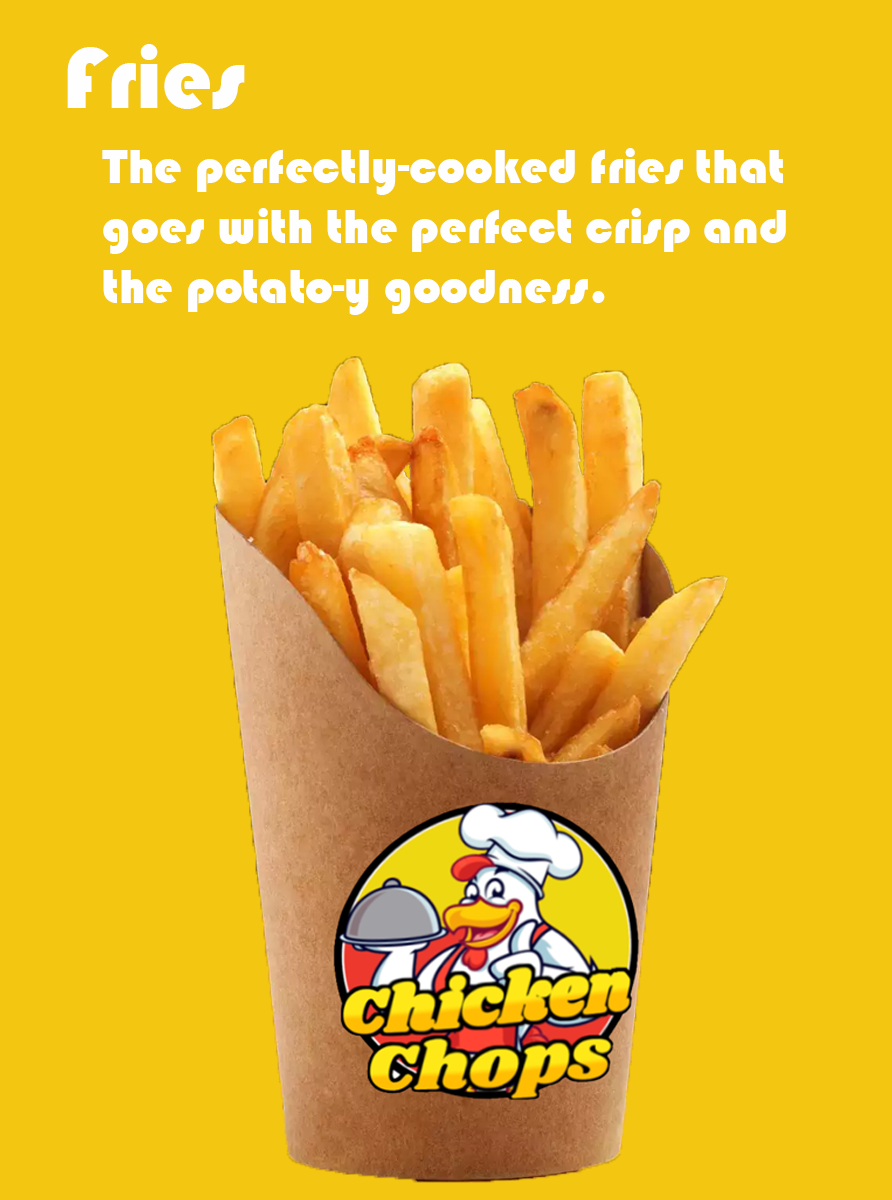
<style>
.page{position:relative;width:892px;height:1200px;background:#f3c611}
.page>*{position:absolute;margin:0}
.t1{font:90px "Bauhaus93";color:#fefefe}
.t2{font:50px "Bauhaus93";color:#fefefe}
</style>
<div class="page">
<p class="t1" style="left:67px;top:44px;width:178px;height:65px">Fries</p>
<p class="t2" style="left:102px;top:148px;width:684px;height:167px">The perfectly-cooked fries that<br>goes with the perfect crisp and<br>the potato-y goodness.</p>
</div>
